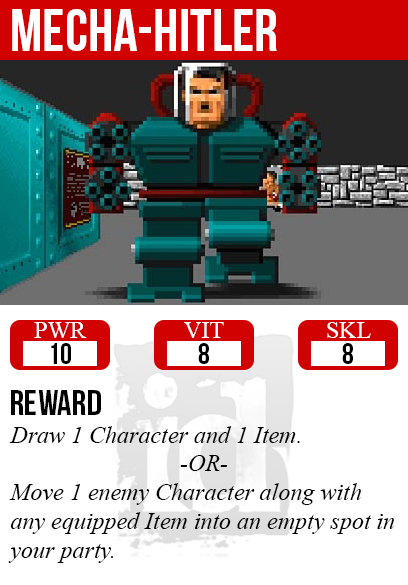
<style>
.page{position:relative;width:408px;height:585px;background:#ffffff}
.page>*{position:absolute;margin:0}
.t1{font:60px "BebasNeue";color:#ffffff}
.t2{font:24px "TimesNewRomanPSMT";color:#ffffff}
.t3{font:30px "BebasNeue";color:#000000}
.t4{font:36px "BebasNeue";color:#000000}
.t5{font:24px "TimesNewRomanPS-ItalicMT";color:#000000}
</style>
<div class="page">
<p class="t1" style="left:12px;top:9px;width:265px;height:42px">Mecha-hitler</p>
<p class="t2" style="left:34px;top:322px;width:53px;height:16px">PWR</p>
<p class="t2" style="left:184px;top:322px;width:40px;height:16px">VIT</p>
<p class="t2" style="left:327px;top:322px;width:44px;height:16px">SKL</p>
<p class="t3" style="left:51px;top:343px;width:20px;height:21px">10</p>
<p class="t3" style="left:198px;top:343px;width:11px;height:21px">8</p>
<p class="t3" style="left:342px;top:343px;width:11px;height:21px">8</p>
<p class="t4" style="left:11px;top:390px;width:90px;height:25px">reward</p>
<p class="t5" style="left:8px;top:426px;width:386px;height:137px">Draw 1 Character and 1 Item.<br><br>Move 1 enemy Character along with<br>any equipped Item into an empty spot in<br>your party.</p>
<p class="t5" style="left:180px;top:455px;width:48px;height:16px">-OR-</p>
</div>
